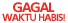
<style>
.page{position:relative;width:68px;height:23px;background:#ffffff}
.page>*{position:absolute;margin:0}
.t1{font:9px/9px "UDShinGoPro-Bold";letter-spacing:-0.08em;color:#e53028}
.t2{font:12px/10px "UDShinGoPro-Bold";letter-spacing:-0.08em;color:#e53028}
</style>
<div class="page">
<p class="t1" style="left:2px;top:2px;width:63px;height:19px;text-align:center"><span class="t2">GAGAL<br></span>WAKTU HABIS!</p>
</div>
